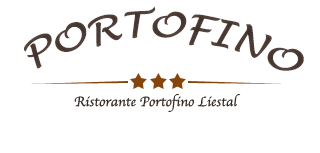
<style>
.page{position:relative;width:320px;height:153px;background:#ffffff}
.page>*{position:absolute;margin:0}
.t1{font:36px "LucidaHandwriting-Italic";color:#4d3d36}
.t2{font:14px "Apple-Chancery";color:#362a25}
.t3{font:18px "LucidaHandwriting-Italic";color:#362a25}
</style>
<div class="page">
<p class="t1" style="left:24px;top:6px;width:280px;height:65px;rotate:3deg">PORTOFINO</p>
<p class="t2" style="left:74px;top:94px;width:167px;height:18px">Ristorante Portofino Liestal<br><span class="t3"></span></p>
</div>
